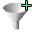
<style>
.page{position:relative;width:32px;height:32px;background:#ffffff}
.page>*{position:absolute;margin:0}
.t1{font:16px "Verdana-Bold";letter-spacing:0.04em;color:#56f06b}
</style>
<div class="page">
<p class="t1" style="left:22px;top:1px;width:9px;height:9px">+</p>
</div>
